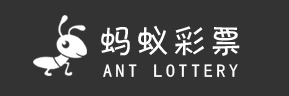
<style>
.page{position:relative;width:289px;height:96px;background:#333333}
.page>*{position:absolute;margin:0}
.t1{font:35px "FZKATJW--GB1-0";letter-spacing:0.05em;color:#ffffff}
.t2{font:18px "SimHei";letter-spacing:0.2em;color:#ffffff}
</style>
<div class="page">
<p class="t1" style="left:101px;top:25px;width:139px;height:31px">蚂蚁彩票</p>
<p class="t2" style="left:103px;top:64px;width:135px;height:13px">ANT LOTTERY</p>
</div>
